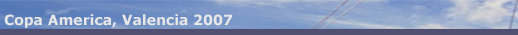
<style>
.page{position:relative;width:518px;height:35px}
.page>*{position:absolute;margin:0}
.t1{font:14px "Verdana-Bold";color:#e6e6e6}
</style>
<div class="page">
<p class="t1" style="left:4px;top:14px;width:228px;height:14px">Copa America, Valencia 2007</p>
</div>
